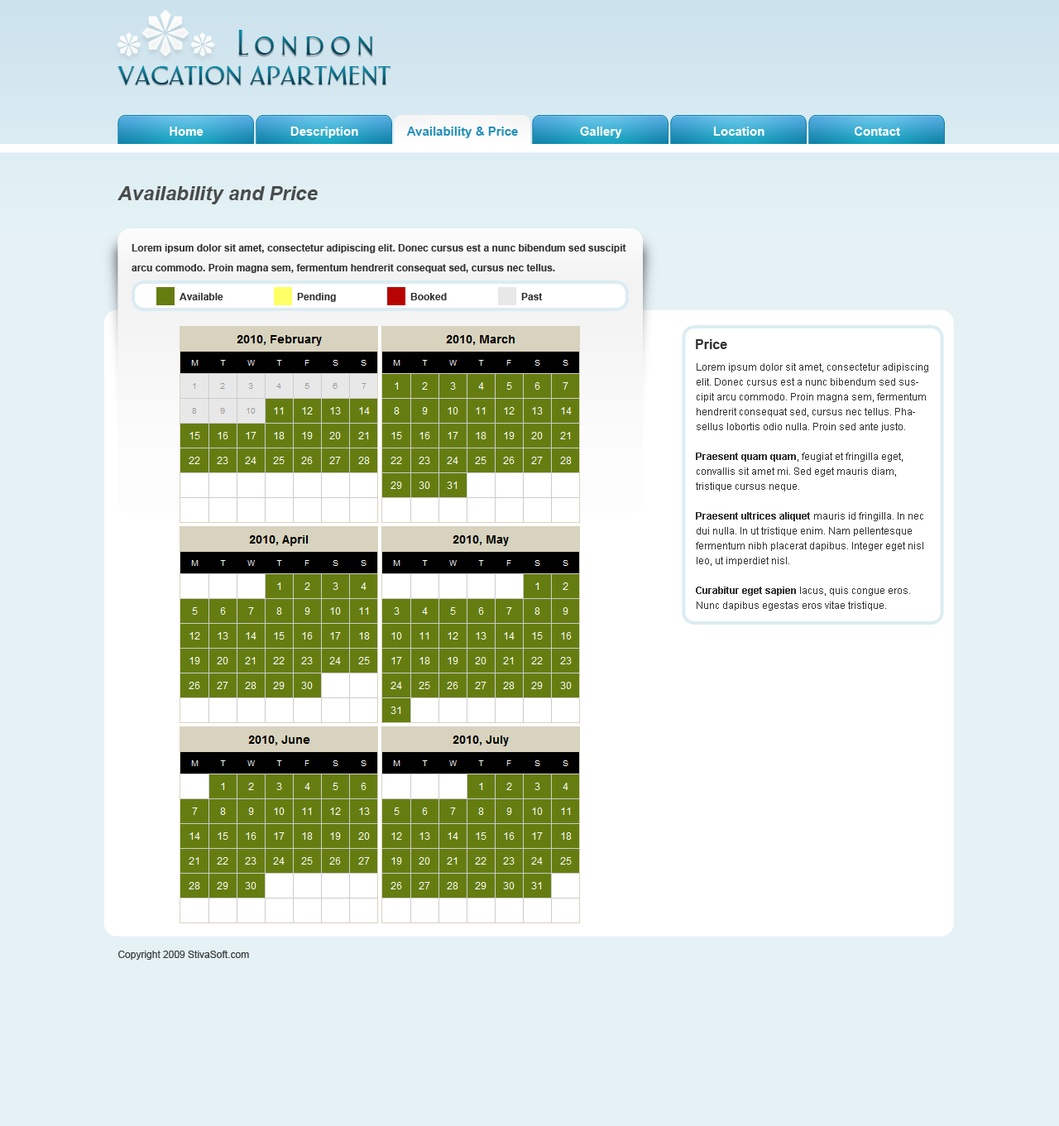
<style>
.page{position:relative;width:1059px;height:1126px;background:#e5f1f5}
.page>*{position:absolute;margin:0}
.t1{font:29.8px "AphasiaBT-Roman";letter-spacing:0.2em}
.t2{font:29.8px "AphasiaBT-Roman"}
.t3{font:12.4px "Arial-BoldMT";color:#ffffff}
.t4{font:12.4px "Arial-BoldMT";color:#2690ba}
.t5{font:19.9px "Arial-BoldItalicMT";color:#4a4c4c}
.t6{font:9.9px/19.9px "Arial-BoldMT";color:#323232}
.t7{font:9.9px "Arial-BoldMT";color:#323232}
.t8{font:13.2px "Arial-BoldMT";color:#323232}
.t9{font:9.9px/14.9px "ArialMT";color:#323232}
.t10{font:9.9px/14.9px "Arial-BoldMT";color:#323232}
.t11{font:9.9px "ArialMT";color:#393d3d}
</style>
<div class="page">
<p class="t1" style="left:238px;top:30px;width:134px;height:25px">London</p>
<p class="t2" style="left:117px;top:65px;width:274px;height:20px">vacation apartment</p>
<p class="t3" style="left:170px;top:127px;width:34px;height:9px">Home</p>
<p class="t3" style="left:290px;top:127px;width:68px;height:11px">Description</p>
<p class="t4" style="left:406px;top:127px;width:112px;height:11px">Availability &amp; Price</p>
<p class="t3" style="left:580px;top:127px;width:42px;height:11px">Gallery</p>
<p class="t3" style="left:713px;top:127px;width:51px;height:9px">Location</p>
<p class="t3" style="left:854px;top:127px;width:46px;height:9px">Contact</p>
<p class="t5" style="left:117px;top:186px;width:201px;height:18px">Availability and Price</p>
<p class="t6" style="left:132px;top:244px;width:494px;height:29px">Lorem ipsum dolor sit amet, consectetur adipiscing elit. Donec cursus est a nunc bibendum sed suscipit arcu commodo. Proin magna sem, fermentum hendrerit consequat sed, cursus nec tellus.</p>
<p class="t7" style="left:180px;top:293px;width:43px;height:7px">Available</p>
<p class="t7" style="left:297px;top:293px;width:39px;height:9px">Pending</p>
<p class="t7" style="left:410px;top:293px;width:37px;height:7px">Booked</p>
<p class="t7" style="left:521px;top:293px;width:22px;height:7px">Past</p>
<p class="t8" style="left:696px;top:339px;width:31px;height:10px">Price</p>
<p class="t9" style="left:696px;top:363px;width:232px;height:248px">Lorem ipsum dolor sit amet, consectetur adipiscing elit. Donec cursus est a nunc bibendum sed suscipit arcu commodo. Proin magna sem, fermentum hendrerit consequat sed, cursus nec tellus. Phasellus lobortis odio nulla. Proin sed ante justo. <br><br><span class="t10">Praesent quam quam</span>, feugiat et fringilla eget, convallis sit amet mi. Sed eget mauris diam, tristique cursus neque. <br><br><span class="t10">Praesent ultrices aliquet</span> mauris id fringilla. In nec dui nulla. In ut tristique enim. Nam pellentesque fermentum nibh placerat dapibus. Integer eget nisl leo, ut imperdiet nisl.<br> <br><span class="t10">Curabitur eget sapien</span> lacus, quis congue eros. <br>Nunc dapibus egestas eros vitae tristique.</p>
<p class="t11" style="left:118px;top:951px;width:131px;height:9px">Copyright 2009 StivaSoft.com</p>
</div>
